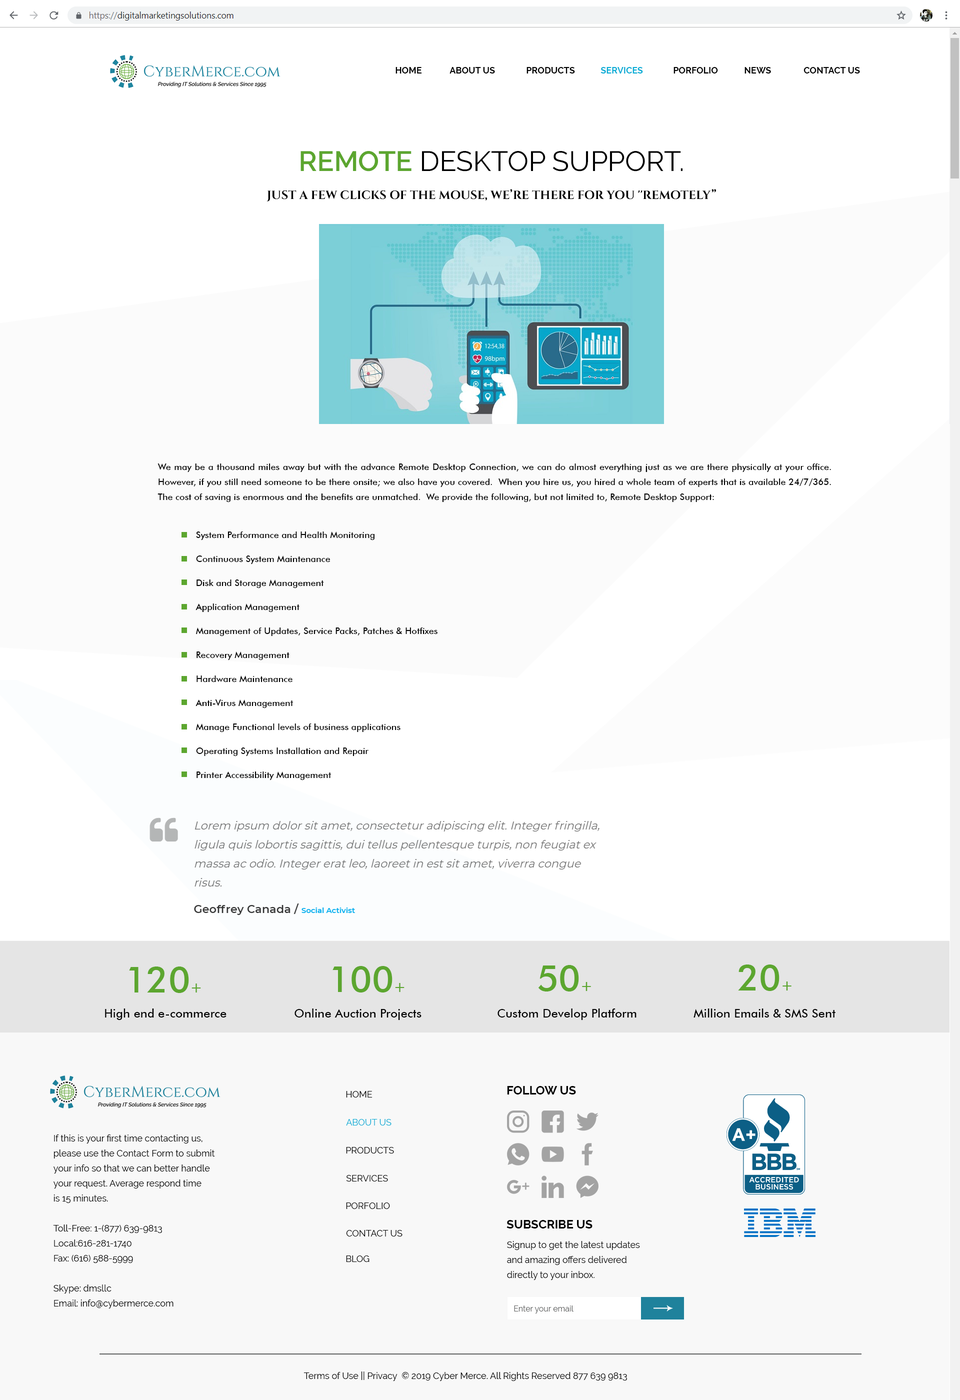
<style>
.page{position:relative;width:960px;height:1400px;background:#ffffff}
.page>*{position:absolute;margin:0}
.t1{font:9px "Raleway-Bold";color:#000000;text-transform:uppercase}
.t2{font:9px "Raleway-Bold";color:#08add6;text-transform:uppercase}
.t3{font:28px "Raleway-Regular";color:#000000;text-transform:uppercase}
.t4{font:28px "Raleway-SemiBold";color:#5ca62f;text-transform:uppercase}
.t5{font:12px "Cinzel-Bold";color:#000000;text-transform:uppercase}
.t6{font:9px/15px "FuturaBT-Medium";color:#000000}
.t7{font:9px/24px "FuturaBT-Medium";color:#000000}
</style>
<div class="page">
<p class="t1" style="left:396px;top:67px;width:26px;height:7px">Home</p>
<p class="t1" style="left:450px;top:67px;width:45px;height:7px">About Us</p>
<p class="t1" style="left:526px;top:67px;width:49px;height:7px">Products</p>
<p class="t2" style="left:600px;top:67px;width:43px;height:7px">Services</p>
<p class="t1" style="left:674px;top:67px;width:44px;height:7px">Porfolio</p>
<p class="t1" style="left:744px;top:67px;width:27px;height:7px">News</p>
<p class="t1" style="left:804px;top:67px;width:56px;height:7px">Contact Us</p>
<p class="t3" style="left:300px;top:151px;width:382px;height:21px"><span class="t4">remote</span> Desktop Support.</p>
<p class="t5" style="left:266px;top:189px;width:450px;height:13px">Just a few clicks of the mouse, we’re there for you ''remotely”</p>
<p class="t6" style="left:158px;top:464px;width:673px;height:38px;text-align:justify">We may be a thousand miles away but with the advance Remote Desktop Connection, we can do almost everything just as we are there physically at your office.  However, if you still need someone to be there onsite; we also have you covered.  When you hire us, you hired a whole team of experts that is available 24/7/365.  The cost of saving is enormous and the benefits are unmatched.  We provide the following, but not limited to, Remote Desktop Support:</p>
<p class="t7" style="left:196px;top:532px;width:242px;height:248px;text-align:justify">System Performance and Health Monitoring<br>Continuous System Maintenance<br>Disk and Storage Management<br>Application Management<br>Management of Updates, Service Packs, Patches &amp; Hotfixes<br>Recovery Management<br>Hardware Maintenance<br>Anti-Virus Management<br>Manage Functional levels of business applications<br>Operating Systems Installation and Repair<br>Printer Accessibility Management<br>Remote Access Management<br>User Profile Management</p>
</div>
